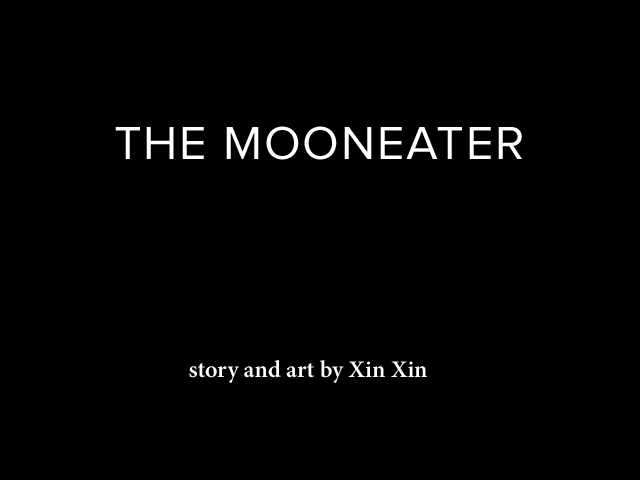
<style>
.page{position:relative;width:640px;height:480px;background:#000000}
.page>*{position:absolute;margin:0}
.t1{font:48px "ProximaNova-Regular";letter-spacing:0.04em;color:#ffffff}
.t2{font:24px "MinionPro-Semibold";color:#ffffff}
</style>
<div class="page">
<p class="t1" style="left:115px;top:126px;width:407px;height:34px">THE MOONEATER</p>
<p class="t2" style="left:189px;top:360px;width:238px;height:23px">story and art by Xin Xin</p>
</div>
